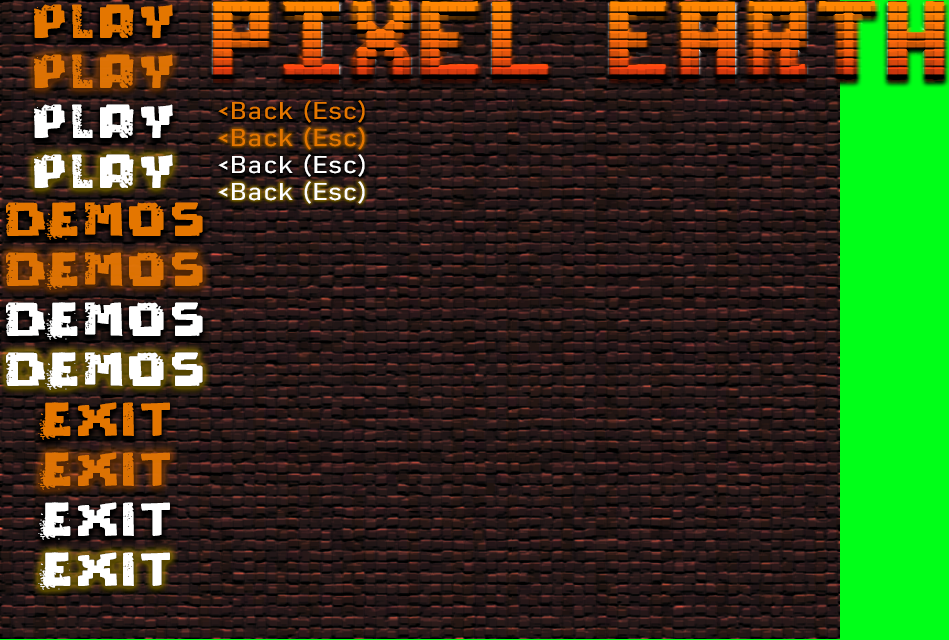
<style>
.page{position:relative;width:949px;height:640px}
.page>*{position:absolute;margin:0}
.t1{font:48px "pixeldead";letter-spacing:0.04em;color:#e47600;scale:1.29 1}
.t2{font:24px "Bahnschrift-SemiLightSemiCondensed";letter-spacing:0.04em;color:#e47600;scale:1.29 1}
.t3{font:48px "pixeldead";letter-spacing:0.04em;color:#ffffff;scale:1.29 1}
.t4{font:24px "Bahnschrift-SemiLightSemiCondensed";letter-spacing:0.04em;color:#ffffff;scale:1.29 1}
</style>
<div class="page">
<p class="t1" style="left:34px;top:4px;width:139px;height:34px">Play</p>
<p class="t1" style="left:34px;top:54px;width:139px;height:34px;opacity:0.95">Play</p>
<p class="t2" style="left:218px;top:100px;width:147px;height:23px">&lt;Back (Esc)</p>
<p class="t3" style="left:34px;top:104px;width:139px;height:34px">Play</p>
<p class="t2" style="left:218px;top:127px;width:147px;height:23px">&lt;Back (Esc)</p>
<p class="t3" style="left:34px;top:154px;width:139px;height:34px">Play</p>
<p class="t4" style="left:218px;top:154px;width:147px;height:23px">&lt;Back (Esc)</p>
<p class="t4" style="left:218px;top:181px;width:147px;height:23px">&lt;Back (Esc)</p>
<p class="t1" style="left:6px;top:202px;width:197px;height:38px">Demos</p>
<p class="t1" style="left:6px;top:252px;width:197px;height:38px;opacity:0.95">Demos</p>
<p class="t3" style="left:6px;top:302px;width:197px;height:38px">Demos</p>
<p class="t3" style="left:6px;top:352px;width:197px;height:38px">Demos</p>
<p class="t1" style="left:38px;top:402px;width:132px;height:38px">Exit</p>
<p class="t1" style="left:38px;top:452px;width:132px;height:38px;opacity:0.95">Exit</p>
<p class="t3" style="left:38px;top:502px;width:132px;height:38px">Exit</p>
<p class="t3" style="left:38px;top:552px;width:132px;height:38px">Exit</p>
</div>
